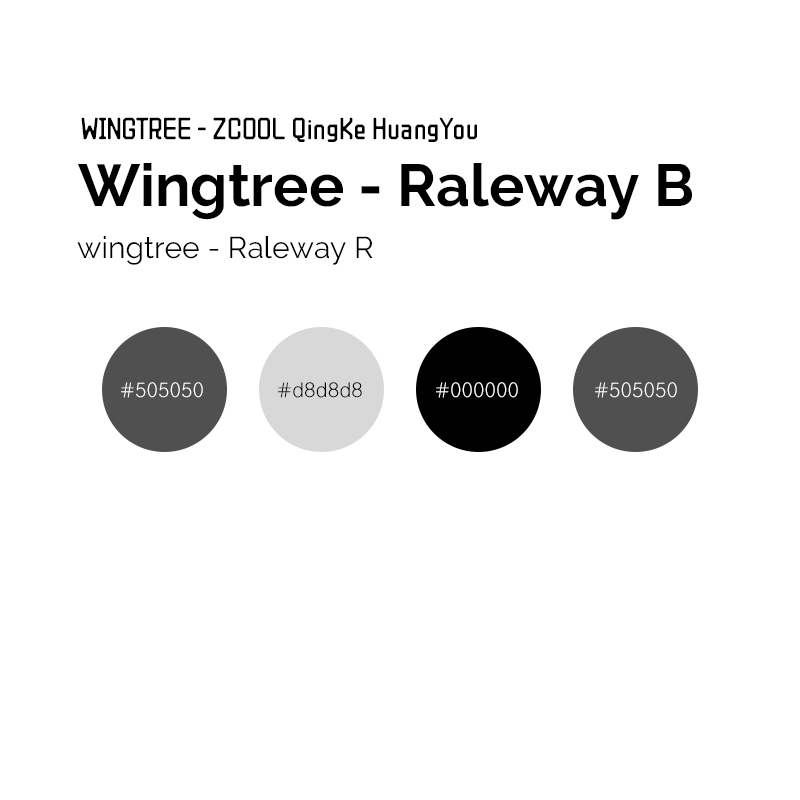
<style>
.page{position:relative;width:800px;height:800px;background:#ffffff}
.page>*{position:absolute;margin:0}
.t1{font:30px "ZCOOLQingKeHuangYou-Regular";color:#000000}
.t2{font:59px "Raleway-Bold";color:#000000}
.t3{font:30px "Raleway-Regular";color:#000000}
.t4{font:20px "Gulim";color:#ffffff}
.t5{font:20px "Gulim";color:#000000}
</style>
<div class="page">
<p class="t1" style="left:81px;top:117px;width:396px;height:25px">WINGTREE - ZCOOL QingKe HuangYou</p>
<p class="t2" style="left:78px;top:163px;width:614px;height:57px">Wingtree - Raleway B</p>
<p class="t3" style="left:77px;top:236px;width:296px;height:29px">wingtree - Raleway R</p>
<p class="t4" style="left:121px;top:382px;width:82px;height:16px">#505050</p>
<p class="t5" style="left:278px;top:382px;width:84px;height:16px">#d8d8d8</p>
<p class="t4" style="left:436px;top:382px;width:82px;height:16px">#000000</p>
<p class="t4" style="left:595px;top:382px;width:82px;height:16px">#505050</p>
</div>
